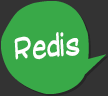
<style>
.page{position:relative;width:108px;height:96px;background:#39a948}
.page>*{position:absolute;margin:0}
.t1{font:32px "SuplexmentaryComicNC";color:#ffffff;scale:0.8 1}
</style>
<div class="page">
<p class="t1" style="left:14px;top:32px;width:66px;height:28px;rotate:-3deg">Redis</p>
</div>
